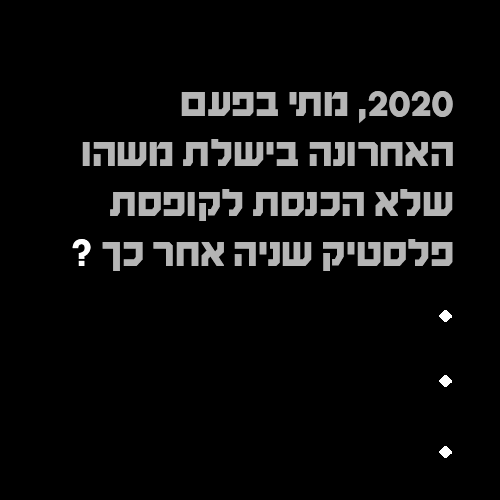
<style>
.page{position:relative;width:500px;height:500px;background:#000000}
.page>*{position:absolute;margin:0}
.t1{font:41.7px "HaimG-Regular";color:#b5b5b5}
.t2{font:41.7px "HaimG-Regular";color:#ffffff}
</style>
<div class="page">
<p class="t1" style="left:72px;top:91px;width:381px;height:180px">2020, מתי בפעם האחרונה בישלת משהו שלא הכנסת לקופסת פלסטיק שניה אחר כך <span class="t2">?</span></p>
</div>
